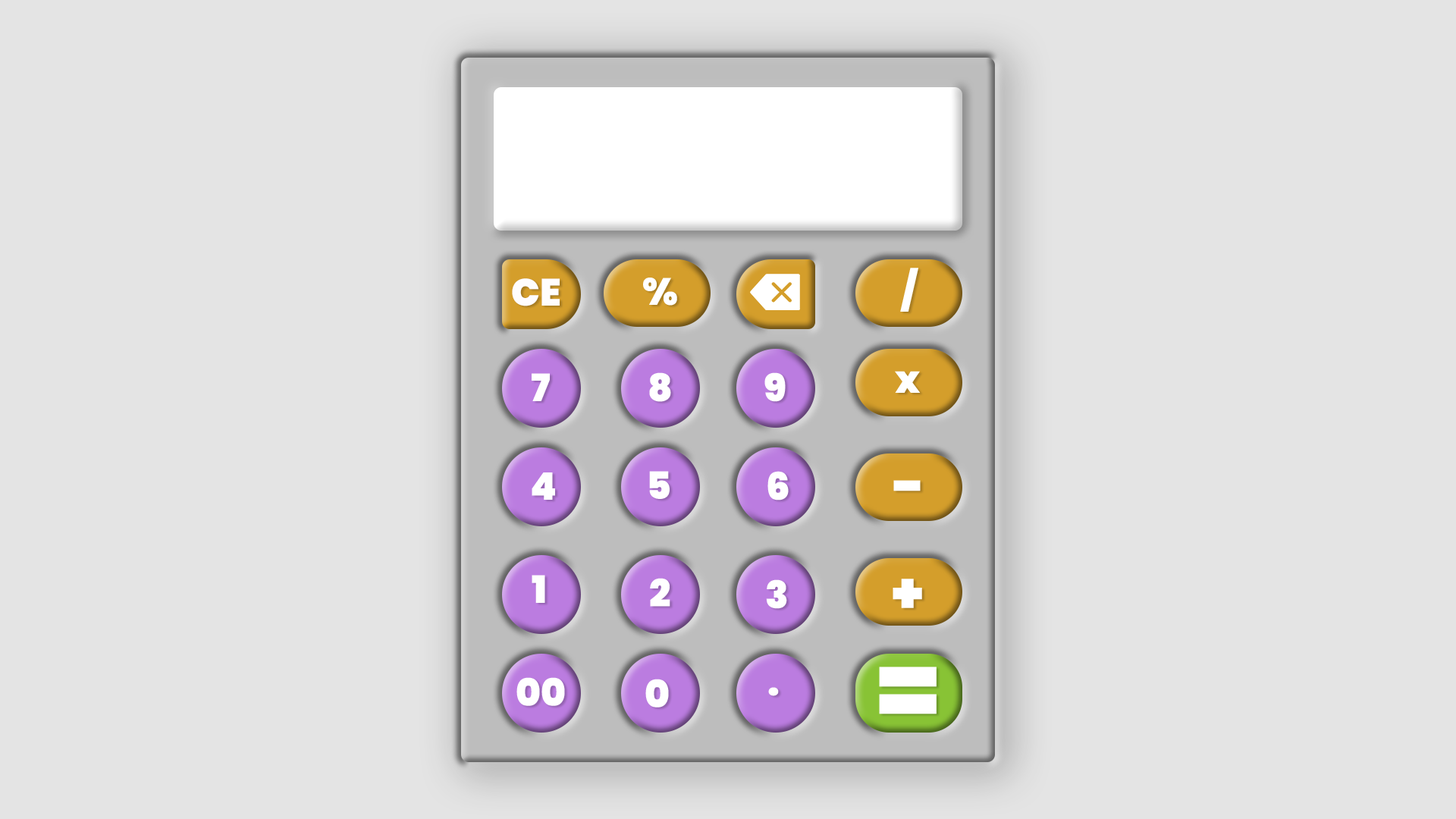
<style>
.page{position:relative;width:1456px;height:819px;background:#e4e4e4}
.page>*{position:absolute;margin:0}
.t1{font:37.9px "Poppins-Black";color:#ffffff}
.t2{font:37.9px "Poppins-Black";color:#fffdfd}
.t3{font:56.9px "Poppins-Black";color:#ffffff}
.t4{font:97.4px "Poppins-Black";color:#ffffff}
</style>
<div class="page">
<p class="t1" style="left:900px;top:268px;width:18px;height:44px">/</p>
<p class="t2" style="left:512px;top:278px;width:48px;height:28px">CE</p>
<p class="t1" style="left:643px;top:278px;width:34px;height:28px">%</p>
<p class="t1" style="left:532px;top:373px;width:18px;height:28px">7</p>
<p class="t1" style="left:649px;top:372px;width:22px;height:30px">8</p>
<p class="t1" style="left:764px;top:372px;width:22px;height:30px">9</p>
<p class="t1" style="left:895px;top:371px;width:26px;height:22px">x</p>
<p class="t1" style="left:532px;top:472px;width:23px;height:28px">4</p>
<p class="t1" style="left:649px;top:471px;width:21px;height:28px">5</p>
<p class="t1" style="left:767px;top:471px;width:22px;height:29px">6</p>
<p class="t3" style="left:893px;top:480px;width:28px;height:11px">-</p>
<p class="t1" style="left:532px;top:575px;width:13px;height:28px">1</p>
<p class="t1" style="left:650px;top:578px;width:20px;height:29px">2</p>
<p class="t1" style="left:766px;top:579px;width:21px;height:30px">3</p>
<p class="t3" style="left:893px;top:579px;width:29px;height:29px">+</p>
<p class="t1" style="left:516px;top:677px;width:49px;height:29px">00</p>
<p class="t4" style="left:879px;top:667px;width:58px;height:47px">=</p>
<p class="t1" style="left:645px;top:679px;width:24px;height:29px">0</p>
<p class="t1" style="left:768px;top:687px;width:11px;height:9px">.</p>
</div>
